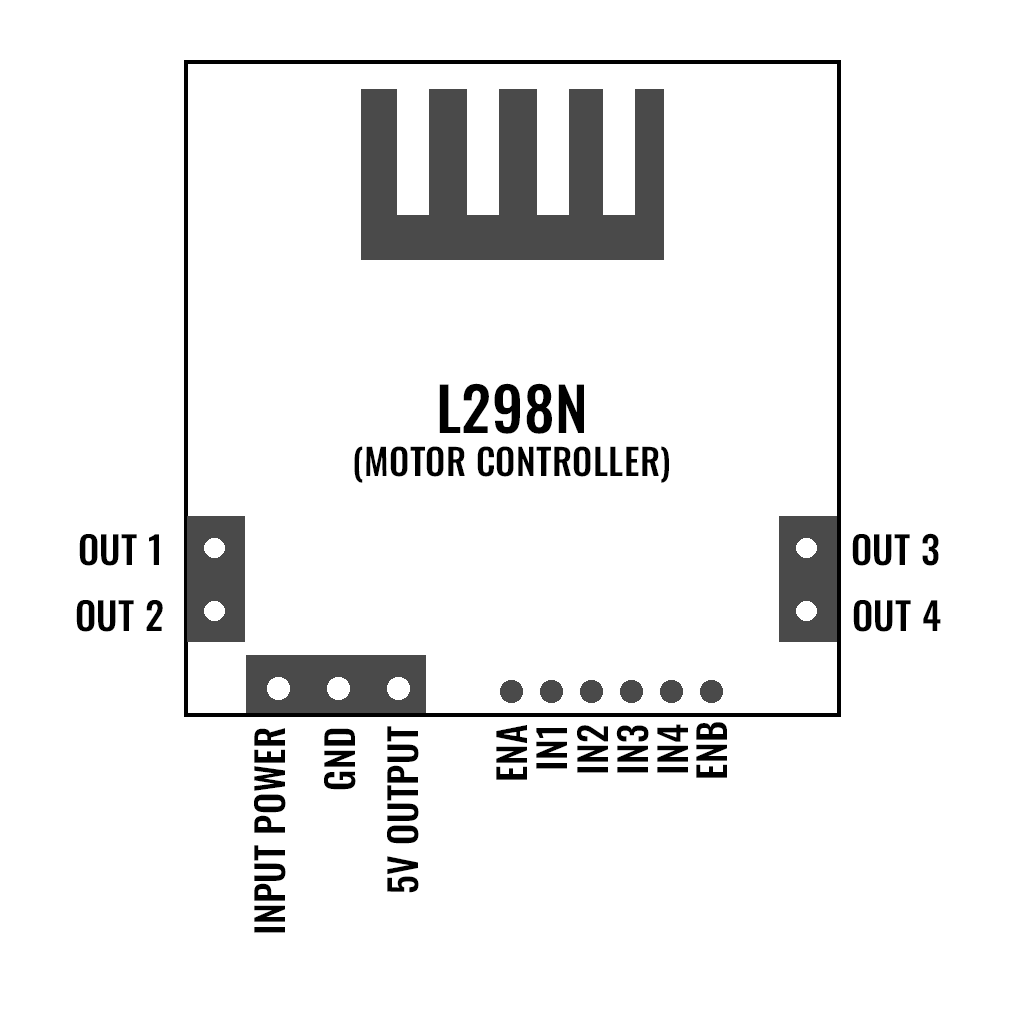
<style>
.page{position:relative;width:1024px;height:1024px;background:#ffffff}
.page>*{position:absolute;margin:0}
.t1{font:36px "Oswald-Medium";letter-spacing:0.01em;color:#000000}
.t2{font:60px "Oswald-Medium";letter-spacing:0.01em;color:#000000}
.t3{font:38px "Oswald-Medium";letter-spacing:0.01em;color:#000000}
</style>
<div class="page">
<p class="t1" style="left:354px;top:383px;width:315px;height:100px;text-align:center"><span class="t2">L298N<br></span>(MOTOR CONTROLLER)</p>
<p class="t3" style="left:79px;top:534px;width:80px;height:32px">OUT 1</p>
<p class="t3" style="left:852px;top:533px;width:87px;height:33px">OUT 3</p>
<p class="t3" style="left:76px;top:600px;width:87px;height:32px">OUT 2</p>
<p class="t3" style="left:853px;top:600px;width:88px;height:32px">OUT 4</p>
<p class="t3" style="left:387px;top:726px;width:32px;height:167px;rotate:-90deg">5V OUTPUT</p>
<p class="t3" style="left:496px;top:725px;width:31px;height:55px;rotate:-90deg">ENA</p>
<p class="t3" style="left:577px;top:725px;width:31px;height:48px;rotate:-90deg">IN2</p>
<p class="t3" style="left:616px;top:725px;width:33px;height:48px;rotate:-90deg">IN3</p>
<p class="t3" style="left:657px;top:724px;width:31px;height:49px;rotate:-90deg">IN4</p>
<p class="t3" style="left:696px;top:722px;width:31px;height:56px;rotate:-90deg">ENB</p>
<p class="t3" style="left:254px;top:728px;width:32px;height:205px;rotate:-90deg">INPUT POWER</p>
<p class="t3" style="left:324px;top:728px;width:32px;height:62px;rotate:-90deg">GND</p>
<p class="t3" style="left:536px;top:728px;width:31px;height:41px;rotate:-90deg">IN1</p>
</div>
